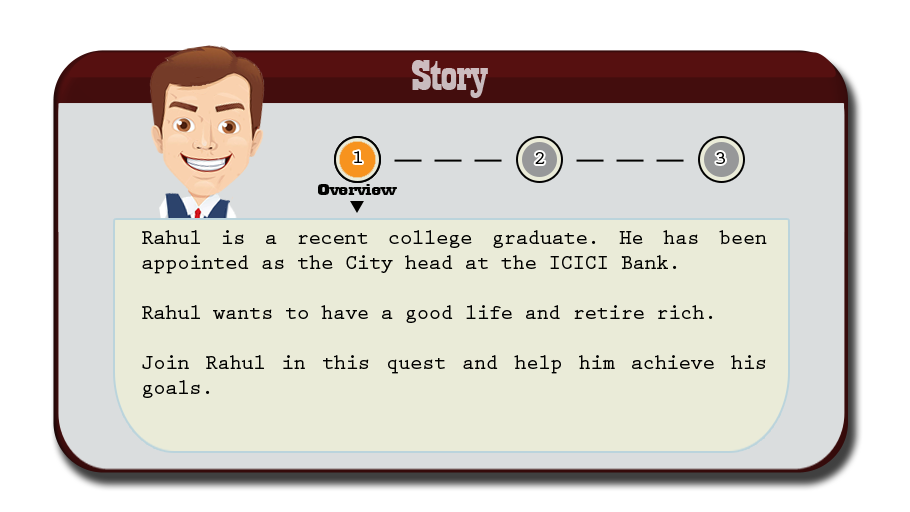
<style>
.page{position:relative;width:910px;height:512px;background:#eaebd8}
.page>*{position:absolute;margin:0}
.t1{font:44.6px "Playbill";letter-spacing:-0.025em;color:#cabbbe;scale:1.61 1}
.t2{font:18.8px "PrestigeEliteStd-Bd";letter-spacing:-0.025em;color:#020201;scale:1.18 1}
.t3{font:17.3px "Playbill";letter-spacing:-0.025em;color:#020201;scale:2.47 1}
.t4{font:20.8px "PrestigeEliteStd-Bd";letter-spacing:-0.025em;color:#020201}
</style>
<div class="page">
<p class="t1" style="left:411px;top:60px;width:77px;height:38px">Story</p>
<p class="t2" style="left:354px;top:151px;width:8px;height:12px">1</p>
<p class="t2" style="left:535px;top:152px;width:10px;height:12px">2</p>
<p class="t2" style="left:716px;top:152px;width:9px;height:12px">3</p>
<p class="t3" style="left:318px;top:184px;width:79px;height:11px">Overview</p>
<p class="t4" style="left:142px;top:230px;width:625px;height:168px;text-align:justify">Rahul is a recent college graduate. He has been appointed as the City head at the ICICI Bank. <br><br>Rahul wants to have a good life and retire rich. <br><br>Join Rahul in this quest and help him achieve his goals.</p>
</div>
